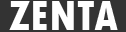
<style>
.page{position:relative;width:126px;height:32px;background:#333333}
.page>*{position:absolute;margin:0}
.t1{font:45.3px "TwCenMT-CondensedExtraBold";color:#ffffff}
</style>
<div class="page">
<p class="t1" style="left:9px;top:1px;width:109px;height:29px">ZENTA</p>
</div>
